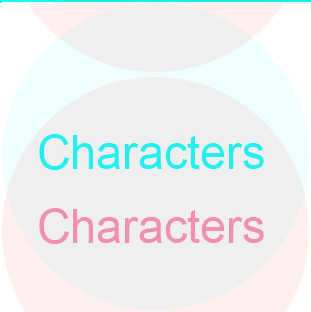
<style>
.page{position:relative;width:311px;height:312px;background:#efefef}
.page>*{position:absolute;margin:0}
.t1{font:46.8px "ArialMT"}
</style>
<div class="page">
<p class="t1" style="left:39px;top:132px;width:225px;height:36px">Characters</p>
</div>
